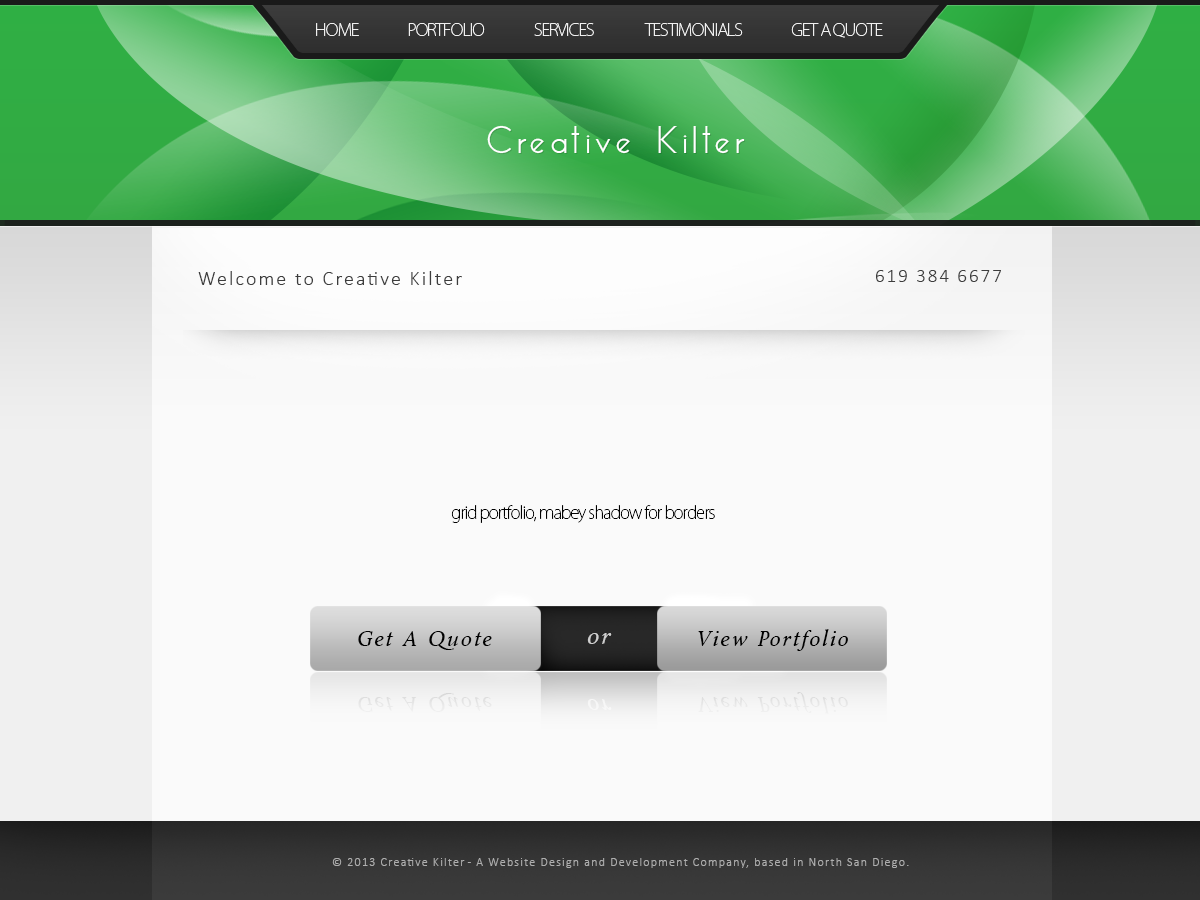
<style>
.page{position:relative;width:1200px;height:900px;background:#fafafa}
.page>*{position:absolute;margin:0}
.t1{font:17px "KozGoPro-ExtraLight";letter-spacing:-0.06em;color:#ffffff}
.t2{font:36px "EssenceSans-Regular";letter-spacing:0.105em;color:#ffffff}
.t3{font:36px "EssenceSans-Regular";letter-spacing:0.105em}
.t4{font:19px "Calibri-Light";letter-spacing:0.105em;color:#3d3d3d}
.t5{font:20px "Calibri-Light";letter-spacing:0.105em;color:#3d3d3d}
.t6{font:17px "KozGoPro-ExtraLight";letter-spacing:-0.06em;color:#000000}
.t7{font:20px "Byington-Italic";letter-spacing:0.105em;color:#000000}
.t8{font:22px "Byington-Italic";letter-spacing:0.105em;color:#cfcfcf}
.t9{font:12px "Calibri-Light";letter-spacing:0.105em;color:#aeaeae}
</style>
<div class="page">
<p class="t1" style="left:316px;top:23px;width:567px;height:15px;opacity:0.9">HOME          PORTFOLIO   SERVICES    TESTIMONIALS                 GET A QUOTE</p>
<p class="t2" style="left:487px;top:125px;width:258px;height:29px">Creative Kilter</p>
<p class="t3" style="left:488px;top:126px;width:258px;height:29px">Creative Kilter</p>
<p class="t4" style="left:876px;top:270px;width:125px;height:12px">619 384 6677</p>
<p class="t5" style="left:198px;top:271px;width:264px;height:14px">Welcome to Creative Kilter</p>
<p class="t6" style="left:451px;top:505px;width:264px;height:18px">grid portfolio, mabey shadow for borders</p>
<p class="t7" style="left:698px;top:629px;width:150px;height:22px">View Portfolio</p>
<p class="t7" style="left:358px;top:631px;width:134px;height:19px">Get A Quote</p>
<p class="t8" style="left:587px;top:633px;width:25px;height:11px">or</p>
<p class="t9" style="left:332px;top:858px;width:577px;height:10px">© 2013 Creative Kilter - A Website Design and Development Company, based in North San Diego.</p>
</div>
